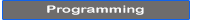
<style>
.page{position:relative;width:224px;height:20px;background:#6e6c6c}
.page>*{position:absolute;margin:0}
.t1{font:10.2px "ArialRoundedMTBold";color:#fcfcfc;scale:1.47 1}
</style>
<div class="page">
<p class="t1" style="left:47px;top:5px;width:97px;height:10px">Programming</p>
</div>
